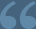
<style>
.page{position:relative;width:36px;height:29px;background:#46637e}
.page>*{position:absolute;margin:0}
.t1{font:83px "Georgia-Bold";color:#6089a7;text-transform:uppercase}
</style>
<div class="page">
<p class="t1" style="left:0px;top:1px;width:37px;height:28px">“</p>
</div>
